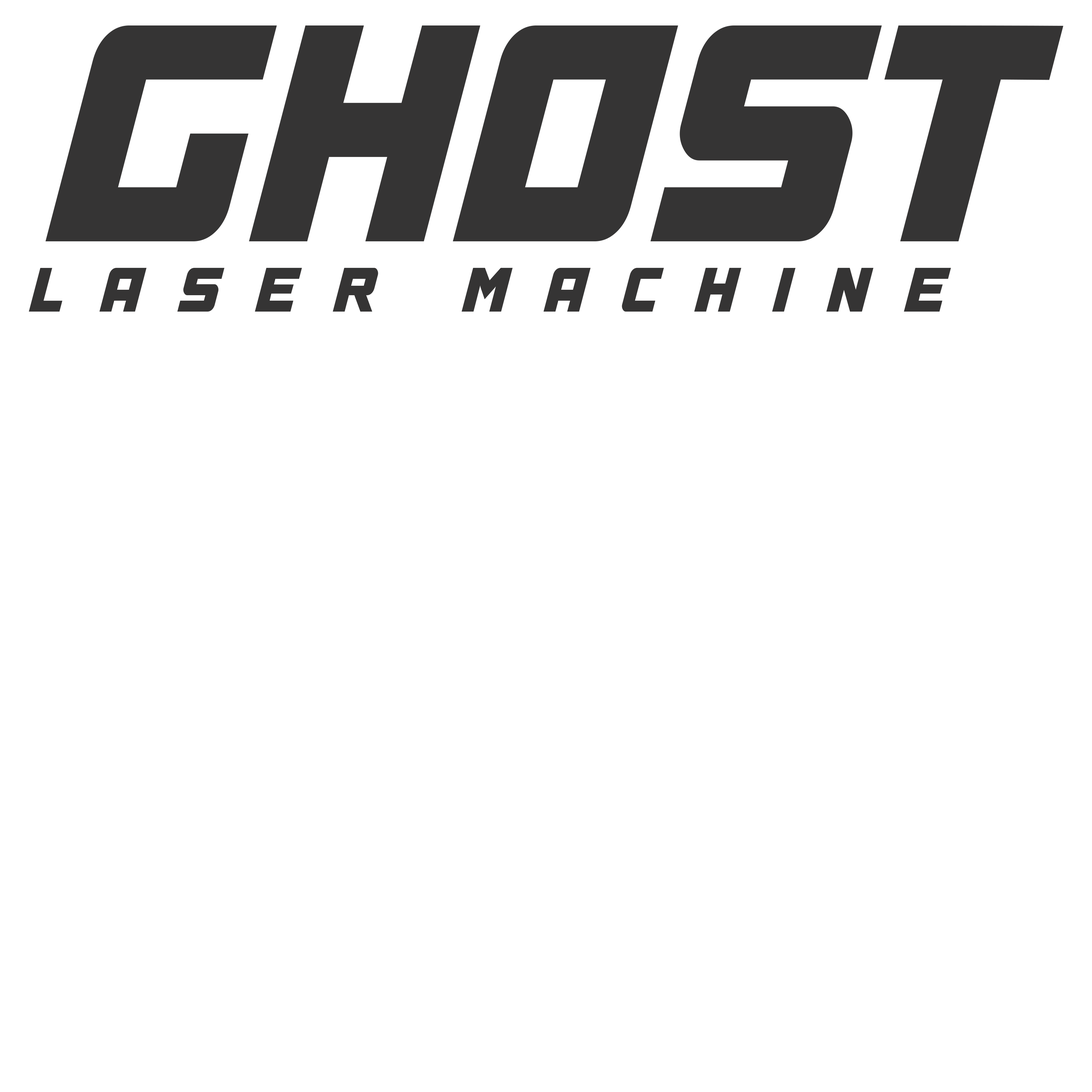
<style>
.page{position:relative;width:1092px;height:1092px;background:#ffffff}
.page>*{position:absolute;margin:0}
.t1{font:348.7px "A4SPEEDBold";color:#353434;scale:0.72 1}
.t2{font:70.6px "A4SPEEDBold";letter-spacing:0.72em;color:#353434;scale:0.72 1}
</style>
<div class="page">
<p class="t1" style="left:45px;top:25px;width:1019px;height:216px">GHOST</p>
<p class="t2" style="left:29px;top:268px;width:922px;height:44px">LASER MACHINE</p>
</div>
